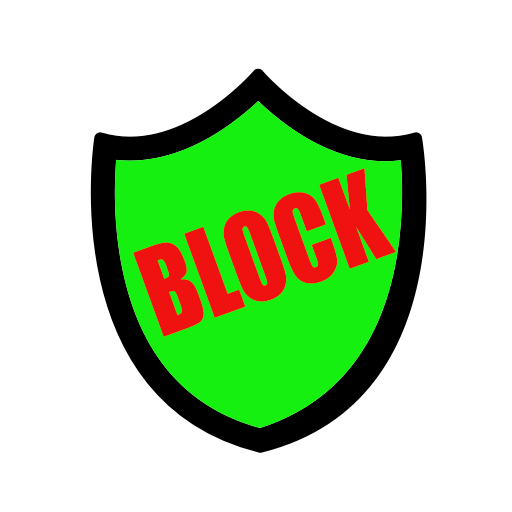
<style>
.page{position:relative;width:512px;height:512px;background:#ffffff}
.page>*{position:absolute;margin:0}
.t1{font:112.8px "Impact";color:#f01111;scale:0.87 1}
</style>
<div class="page">
<p class="t1" style="left:133px;top:168px;width:263px;height:169px;rotate:-20deg">BLOCK</p>
</div>
